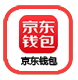
<style>
.page{position:relative;width:78px;height:80px;background:#ffffff}
.page>*{position:absolute;margin:0}
.t1{font:9px "MicrosoftYaHei";color:#000000}
.t2{font:9px "MicrosoftYaHei";color:#0a0a0a;font-weight:bold}
</style>
<div class="page">
<p class="t1" style="left:20px;top:56px;width:37px;height:10px">京东钱包</p>
<p class="t2" style="left:20px;top:56px;width:38px;height:10px">京东钱包</p>
</div>
